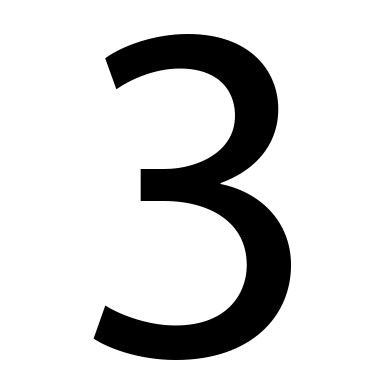
<style>
.page{position:relative;width:384px;height:384px;background:#ffffff}
.page>*{position:absolute;margin:0}
.t1{font:486.1px "MyriadPro-Regular";color:#000000}
</style>
<div class="page">
<p class="t1" style="left:93px;top:34px;width:198px;height:326px">3</p>
</div>
